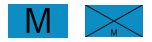
<style>
.page{position:relative;width:152px;height:42px;background:#0c8ec5}
.page>*{position:absolute;margin:0}
.t1{font:34px "ArialMT";color:#000000}
</style>
<div class="page">
<p class="t1" style="left:26px;top:8px;width:24px;height:25px">M</p>
</div>
